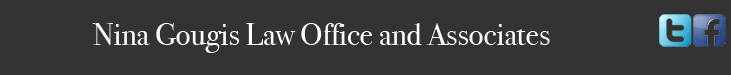
<style>
.page{position:relative;width:731px;height:75px;background:#333333}
.page>*{position:absolute;margin:0}
.t1{font:31.3px "BodoniSvtyTwoOSITCTT-Book";color:#ffffff}
</style>
<div class="page">
<p class="t1" style="left:92px;top:23px;width:458px;height:30px">Nina Gougis Law Office and Associates</p>
</div>
